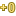
<style>
.page{position:relative;width:16px;height:16px;background:#ffffff}
.page>*{position:absolute;margin:0}
.t1{font:12px "Arial-BoldMT";letter-spacing:0.05em;color:#f9e07b}
</style>
<div class="page">
<p class="t1" style="left:8px;top:3px;width:7px;height:9px">0</p>
</div>
